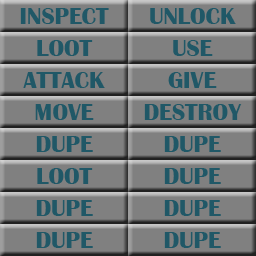
<style>
.page{position:relative;width:256px;height:256px;background:#808080}
.page>*{position:absolute;margin:0}
.t1{font:24px "BritannicBold";color:#205867}
</style>
<div class="page">
<p class="t1" style="left:20px;top:8px;width:89px;height:16px">INSPECT</p>
<p class="t1" style="left:150px;top:8px;width:86px;height:16px">UNLOCK</p>
<p class="t1" style="left:37px;top:40px;width:56px;height:16px">LOOT</p>
<p class="t1" style="left:173px;top:40px;width:40px;height:16px">USE</p>
<p class="t1" style="left:23px;top:72px;width:82px;height:16px">ATTACK</p>
<p class="t1" style="left:168px;top:72px;width:49px;height:16px">GIVE</p>
<p class="t1" style="left:35px;top:104px;width:59px;height:16px">MOVE</p>
<p class="t1" style="left:144px;top:104px;width:98px;height:16px">DESTROY</p>
<p class="t1" style="left:36px;top:136px;width:57px;height:16px">DUPE</p>
<p class="t1" style="left:164px;top:136px;width:57px;height:16px">DUPE</p>
<p class="t1" style="left:37px;top:168px;width:56px;height:16px">LOOT</p>
<p class="t1" style="left:164px;top:168px;width:57px;height:16px">DUPE</p>
<p class="t1" style="left:36px;top:200px;width:57px;height:16px">DUPE</p>
<p class="t1" style="left:164px;top:200px;width:57px;height:16px">DUPE</p>
<p class="t1" style="left:36px;top:232px;width:57px;height:16px">DUPE</p>
<p class="t1" style="left:164px;top:232px;width:57px;height:16px">DUPE</p>
</div>
